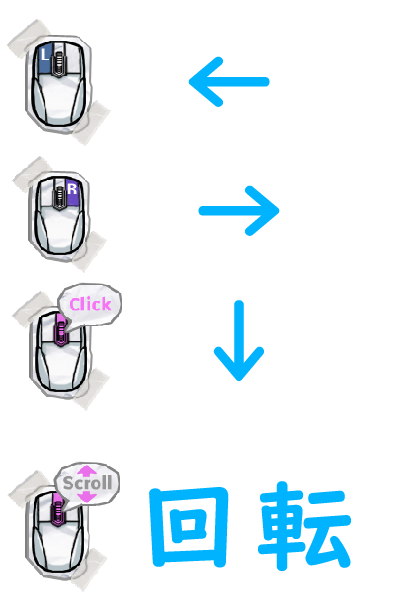
<style>
.page{position:relative;width:400px;height:600px;background:#ffffff}
.page>*{position:absolute;margin:0}
.t1{font:100px "UDDigiKyokashoN-B";letter-spacing:0.16em;color:#00b3fe}
</style>
<div class="page">
<p class="t1" style="left:188px;top:56px;width:82px;height:51px">←</p>
<p class="t1" style="left:198px;top:185px;width:82px;height:51px">→</p>
<p class="t1" style="left:213px;top:300px;width:51px;height:81px">↓</p>
<p class="t1" style="left:149px;top:481px;width:202px;height:90px">回転</p>
</div>
